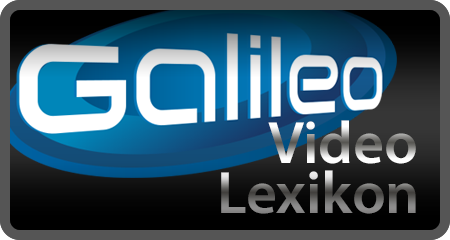
<style>
.page{position:relative;width:450px;height:240px}
.page>*{position:absolute;margin:0}
.t1{font:60px "MyriadPro-Semibold"}
</style>
<div class="page">
<p class="t1" style="left:268px;top:120px;width:148px;height:44px">Video</p>
<p class="t1" style="left:221px;top:170px;width:195px;height:44px">Lexikon</p>
</div>
